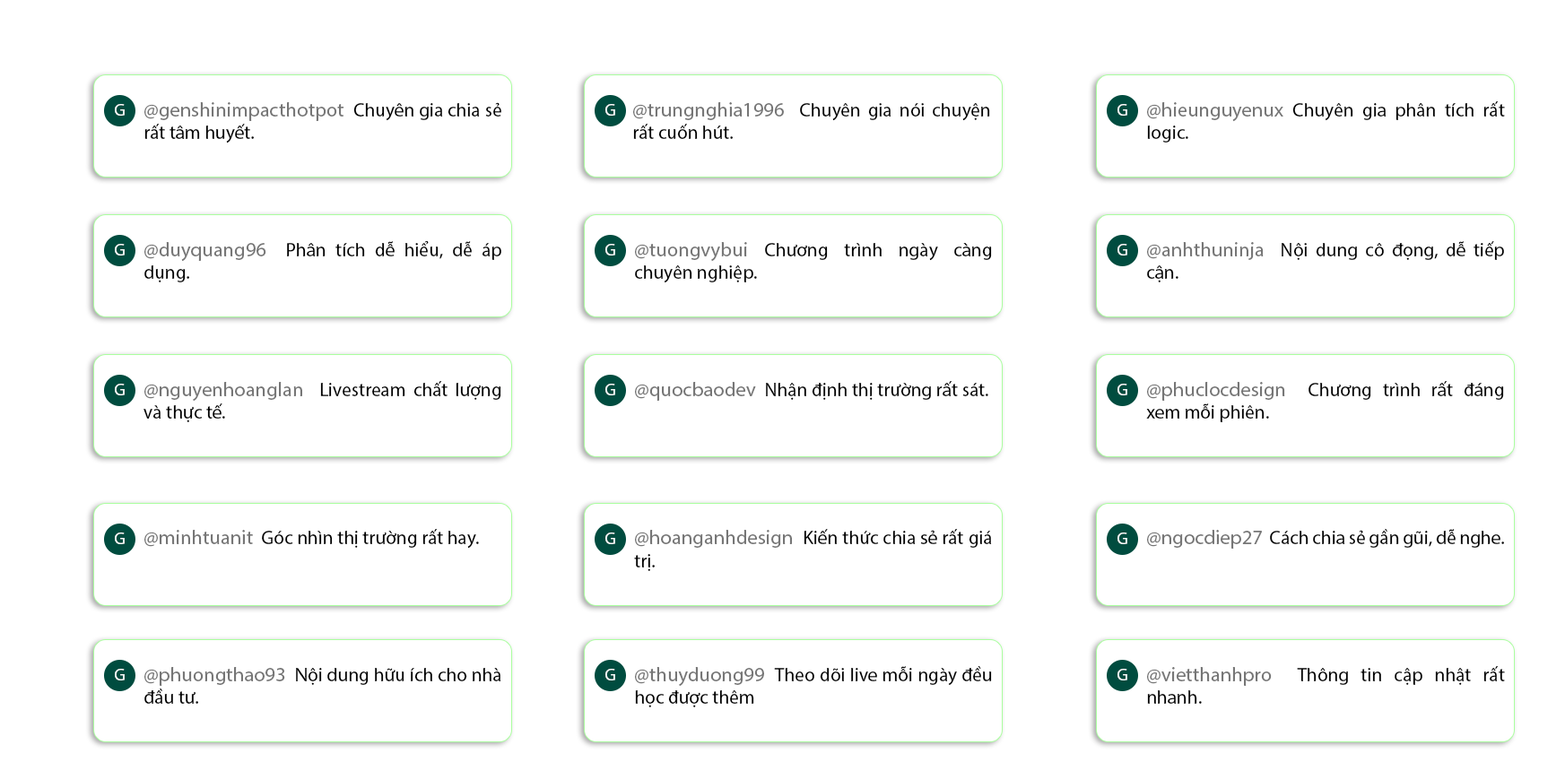
<style>
.page{position:relative;width:1565px;height:762px;background:#ffffff}
.page>*{position:absolute;margin:0}
.t1{font:19.1px "MyriadPro-Regular";color:#010101}
.t2{font:20.3px "MyriadPro-Regular";color:#767676}
.t3{font:17.3px "MyriadPro-Regular";color:#ffffff}
</style>
<div class="page">
<p class="t1" style="left:1147px;top:101px;width:358px;height:42px;text-align:justify"><span class="t2">@hieunguyenux </span>Chuyên gia phân tích rất logic.</p>
<p class="t3" style="left:115px;top:104px;width:10px;height:12px">G</p>
<p class="t1" style="left:144px;top:102px;width:357px;height:41px;text-align:justify"><span class="t2">@genshinimpacthotpot  </span>Chuyên gia chia sẻ rất tâm huyết.</p>
<p class="t3" style="left:605px;top:104px;width:10px;height:12px">G</p>
<p class="t1" style="left:633px;top:102px;width:357px;height:37px;text-align:justify"><span class="t2">@trungnghia1996  </span>Chuyên gia nói chuyện rất cuốn hút.</p>
<p class="t3" style="left:1117px;top:104px;width:10px;height:12px">G</p>
<p class="t3" style="left:115px;top:244px;width:10px;height:12px">G</p>
<p class="t1" style="left:144px;top:240px;width:357px;height:42px;text-align:justify"><span class="t2">@duyquang96  </span>Phân tích dễ hiểu, dễ áp dụng.</p>
<p class="t3" style="left:605px;top:244px;width:10px;height:12px">G</p>
<p class="t1" style="left:635px;top:242px;width:357px;height:41px;text-align:justify"><span class="t2">@tuongvybui </span>Chương trình ngày càng chuyên nghiệp.</p>
<p class="t3" style="left:1117px;top:244px;width:10px;height:12px">G</p>
<p class="t1" style="left:1147px;top:241px;width:357px;height:41px;text-align:justify"><span class="t2">@anhthuninja  </span>Nội dung cô đọng, dễ tiếp cận.</p>
<p class="t3" style="left:115px;top:384px;width:10px;height:11px">G</p>
<p class="t1" style="left:143px;top:381px;width:358px;height:41px;text-align:justify"><span class="t2">@nguyenhoanglan  </span>Livestream chất lượng và thực tế.</p>
<p class="t3" style="left:605px;top:384px;width:10px;height:11px">G</p>
<p class="t1" style="left:635px;top:381px;width:353px;height:20px"><span class="t2">@quocbaodev  </span>Nhận định thị trường rất sát.</p>
<p class="t3" style="left:1117px;top:384px;width:10px;height:11px">G</p>
<p class="t1" style="left:1146px;top:381px;width:358px;height:41px;text-align:justify"><span class="t2">@phuclocdesign  </span>Chương trình rất đáng xem mỗi phiên.</p>
<p class="t3" style="left:115px;top:533px;width:10px;height:11px">G</p>
<p class="t1" style="left:144px;top:529px;width:335px;height:20px"><span class="t2">@minhtuanit  </span>Góc nhìn thị trường rất hay.</p>
<p class="t3" style="left:605px;top:533px;width:10px;height:11px">G</p>
<p class="t1" style="left:634px;top:529px;width:358px;height:42px;text-align:justify"><span class="t2">@hoanganhdesign  </span>Kiến thức chia sẻ rất giá trị.</p>
<p class="t3" style="left:1117px;top:533px;width:10px;height:11px">G</p>
<p class="t1" style="left:1147px;top:529px;width:357px;height:20px"><span class="t2">@ngocdiep27  </span>Cách chia sẻ gần gũi, dễ nghe.</p>
<p class="t3" style="left:115px;top:669px;width:10px;height:12px">G</p>
<p class="t1" style="left:144px;top:667px;width:357px;height:37px;text-align:justify"><span class="t2">@phuongthao93  </span>Nội dung hữu ích cho nhà đầu tư.</p>
<p class="t3" style="left:605px;top:669px;width:10px;height:12px">G</p>
<p class="t1" style="left:635px;top:666px;width:357px;height:41px;text-align:justify"><span class="t2">@thuyduong99  </span>Theo dõi live mỗi ngày đều học được thêm</p>
<p class="t3" style="left:1117px;top:669px;width:10px;height:12px">G</p>
<p class="t1" style="left:1147px;top:666px;width:358px;height:38px;text-align:justify"><span class="t2">@vietthanhpro  </span>Thông tin cập nhật rất nhanh.</p>
</div>
